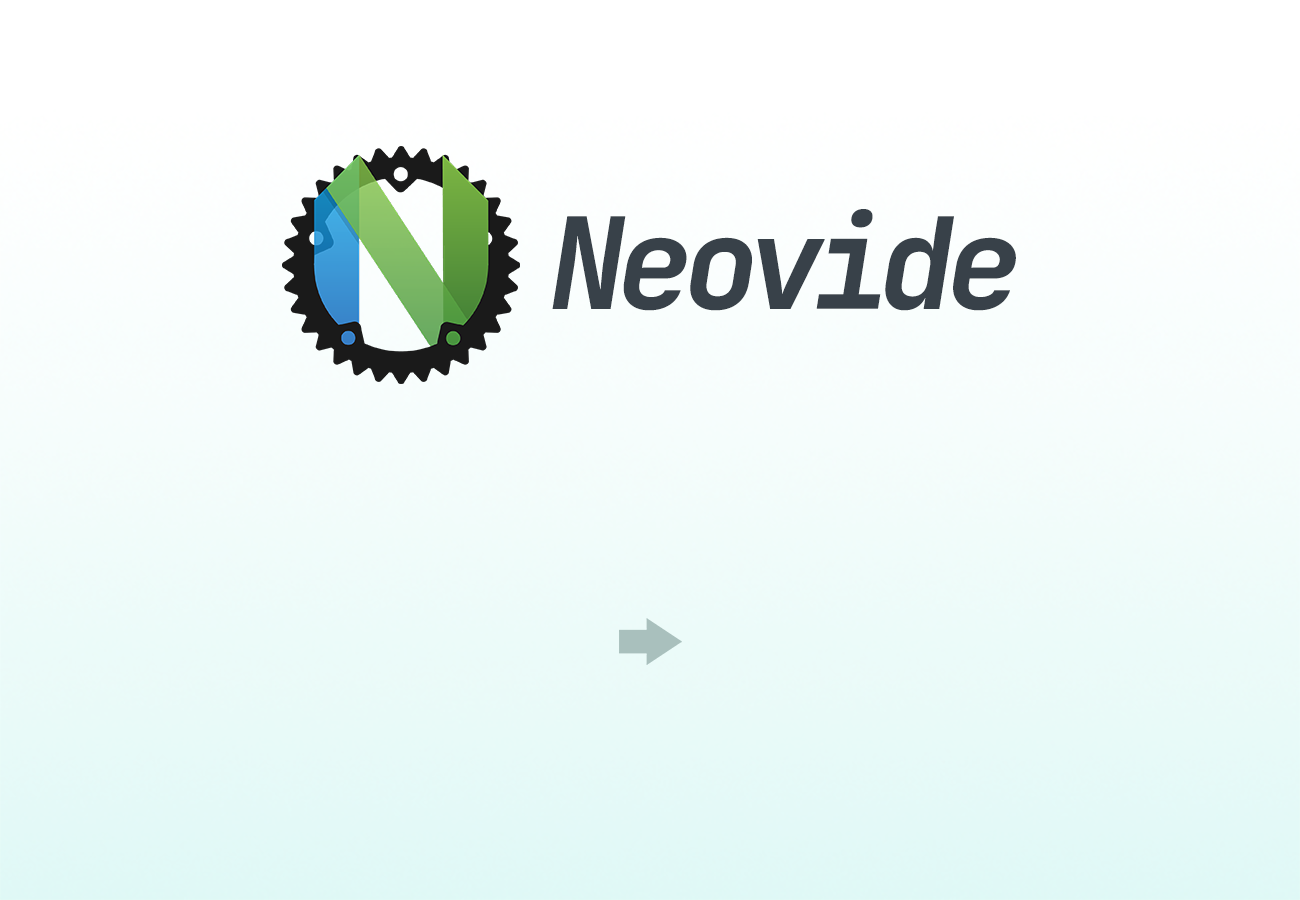
<style>
.page{position:relative;width:1300px;height:900px}
.page>*{position:absolute;margin:0}
.t1{font:126.8px "JetBrainsMonoNF-BoldItalic";letter-spacing:-0.06em;color:#384149}
</style>
<div class="page">
<p class="t1" style="left:552px;top:209px;width:464px;height:102px">Neovide</p>
</div>
